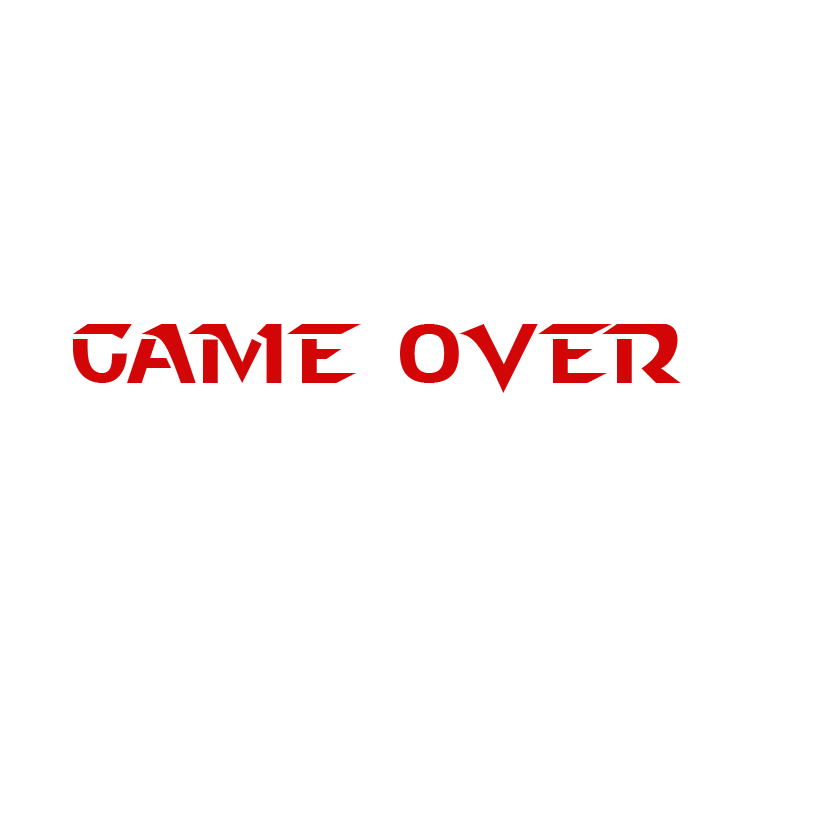
<style>
.page{position:relative;width:836px;height:836px;background:#ffffff}
.page>*{position:absolute;margin:0}
.t1{font:83.7px "StarcraftNormal";color:#d20606}
</style>
<div class="page">
<p class="t1" style="left:73px;top:324px;width:608px;height:69px">Game over</p>
</div>
